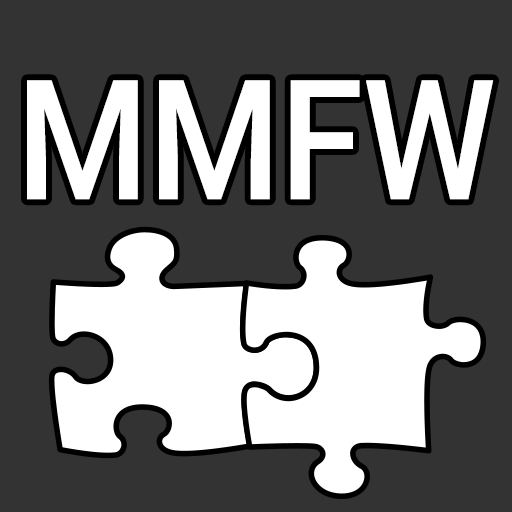
<style>
.page{position:relative;width:512px;height:512px;background:#333333}
.page>*{position:absolute;margin:0}
.t1{font:167.3px "Roboto-Medium";letter-spacing:-0.005em;color:#ffffff;scale:0.91 1}
</style>
<div class="page">
<p class="t1" style="left:27px;top:80px;width:467px;height:120px">MMFW</p>
</div>
